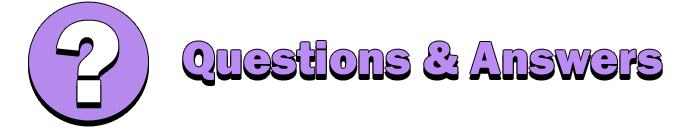
<style>
.page{position:relative;width:678px;height:128px;background:#ffffff}
.page>*{position:absolute;margin:0}
.t1{font:120px "FranklinGothic-Heavy";color:#ffffff}
.t2{font:48px "FranklinGothic-Heavy";color:#bb8df4}
</style>
<div class="page">
<p class="t1" style="left:56px;top:20px;width:63px;height:83px">?</p>
<p class="t2" style="left:183px;top:41px;width:479px;height:39px">Questions &amp; Answers</p>
</div>
